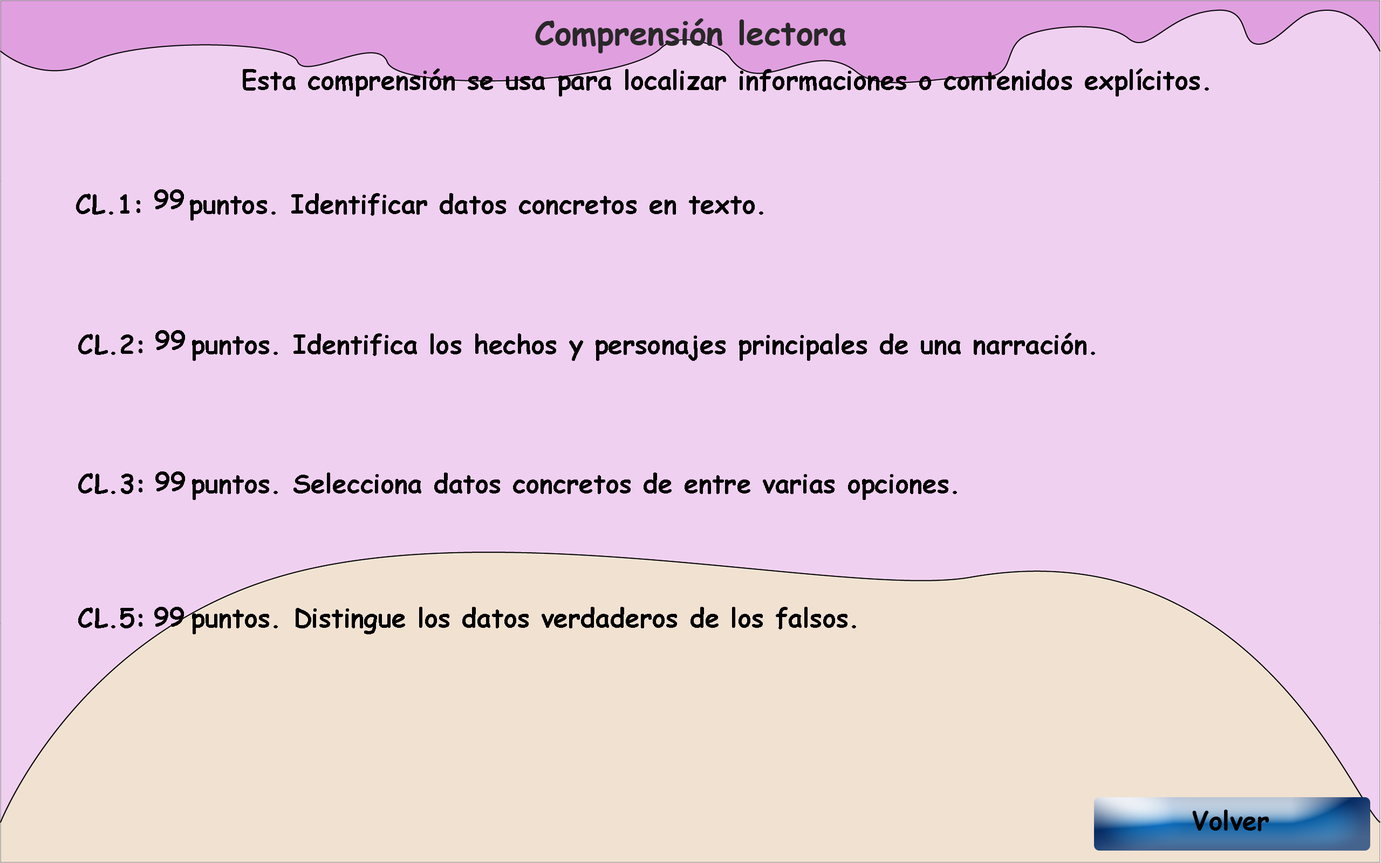
<style>
.page{position:relative;width:1381px;height:863px;background:#efd0f0}
.page>*{position:absolute;margin:0}
.t1{font:32.4px "ComicSansMS-Bold";color:#282828}
.t2{font:25.9px "ComicSansMS-Bold";color:#000000}
</style>
<div class="page">
<p class="t1" style="left:535px;top:18px;width:312px;height:35px">Comprensión lectora</p>
<p class="t2" style="left:243px;top:69px;width:966px;height:28px">Esta comprensión se usa para localizar informaciones o contenidos explícitos.</p>
<p class="t2" style="left:76px;top:193px;width:687px;height:28px">CL.1:    puntos. Identificar datos concretos en texto.</p>
<p class="t2" style="left:154px;top:189px;width:30px;height:20px">99</p>
<p class="t2" style="left:78px;top:333px;width:1017px;height:28px">CL.2:    puntos. Identifica los hechos y personajes principales de una narración.</p>
<p class="t2" style="left:155px;top:330px;width:30px;height:20px">99</p>
<p class="t2" style="left:78px;top:473px;width:879px;height:27px">CL.3:    puntos. Selecciona datos concretos de entre varias opciones.</p>
<p class="t2" style="left:155px;top:472px;width:30px;height:20px">99</p>
<p class="t2" style="left:78px;top:607px;width:778px;height:28px">CL.5:    puntos. Distingue los datos verdaderos de los falsos.</p>
<p class="t2" style="left:154px;top:607px;width:30px;height:20px">99</p>
<p class="t2" style="left:1192px;top:810px;width:78px;height:21px">Volver</p>
</div>
